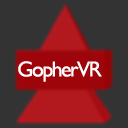
<style>
.page{position:relative;width:128px;height:128px;background:#333333}
.page>*{position:absolute;margin:0}
.t1{font:22px "GillSans";letter-spacing:-0.075em;color:#ffffff}
</style>
<div class="page">
<p class="t1" style="left:18px;top:61px;width:84px;height:21px">GopherVR</p>
</div>
